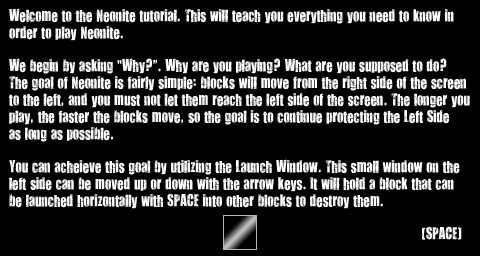
<style>
.page{position:relative;width:480px;height:256px;background:#000000}
.page>*{position:absolute;margin:0}
.t1{font:14px "YouAreLoved";color:#ffffff}
</style>
<div class="page">
<p class="t1" style="left:9px;top:8px;width:461px;height:232px">Welcome to the Neonite tutorial. This will teach you everything you need to know in<br>order to play Neonite.<br><br>We begin by asking “Why?”. Why are you playing? What are you supposed to do?<br>The goal of Neonite is fairly simple: blocks will move from the right side of the screen<br>to the left, and you must not let them reach the left side of the screen. The longer you<br>play, the faster the blocks move, so the goal is to continue protecting the Left Side<br>as long as possible.<br><br>You can acheieve this goal by utilizing the Launch Window. This small window on the<br>left side can be moved up or down with the arrow keys. It will hold a block that can<br>be launched horizontally with SPACE into other blocks to destroy them.<br><br>                                                                                                          (SPACE)</p>
</div>
